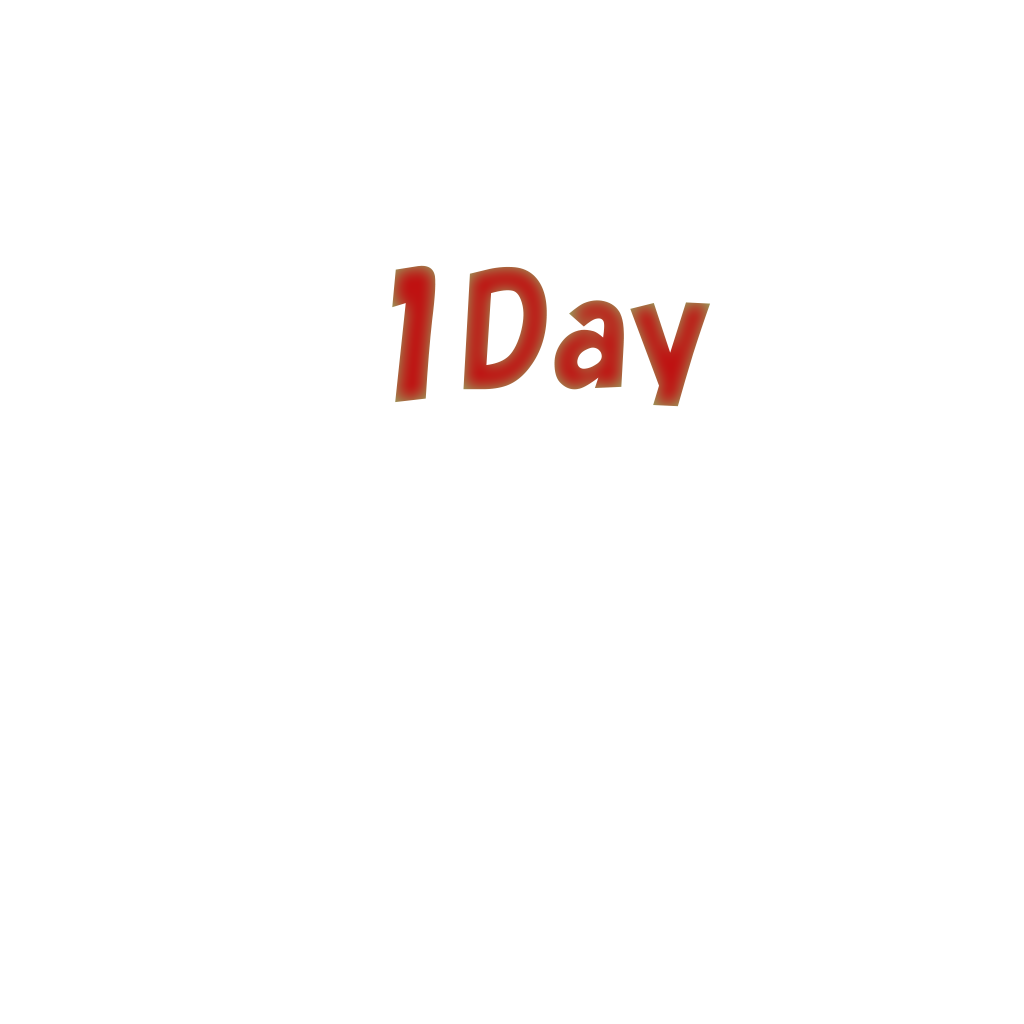
<style>
.page{position:relative;width:1024px;height:1024px;background:#ffffff}
.page>*{position:absolute;margin:0}
.t1{font:150px "HGSSoeiKakupoptai"}
</style>
<div class="page">
<p class="t1" style="left:392px;top:265px;width:319px;height:142px">1Day</p>
</div>
